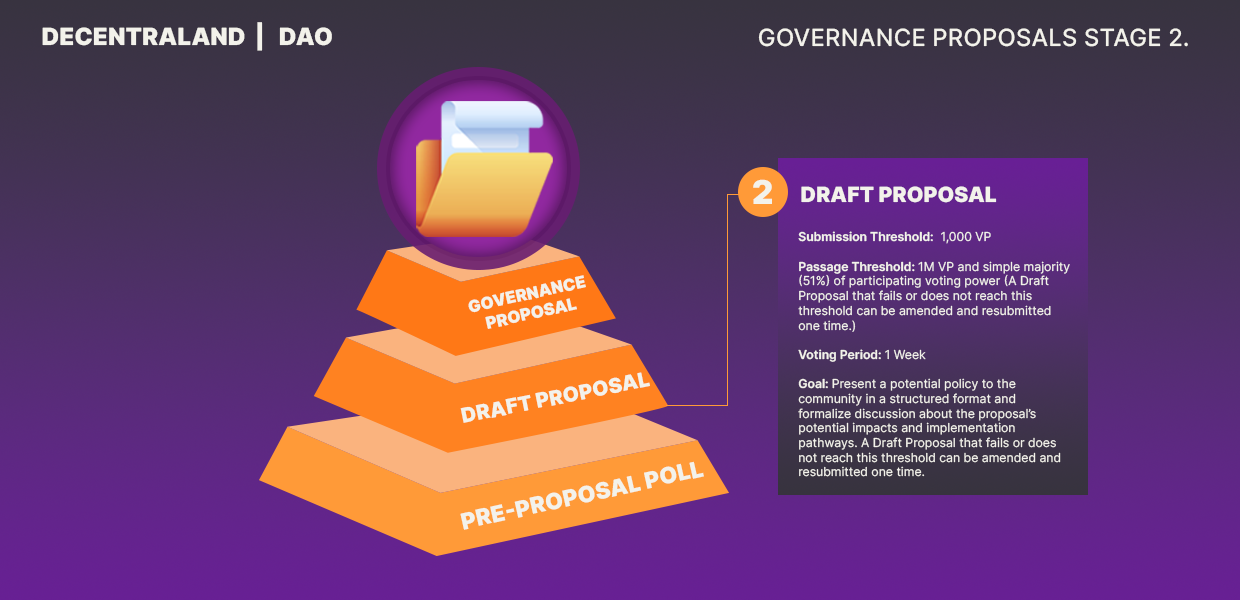
<style>
.page{position:relative;width:1240px;height:600px}
.page>*{position:absolute;margin:0}
.t1{font:23.8px "Inter-Black";color:#f3f2eb;text-transform:uppercase}
.t2{font:23.8px "Inter-Medium";color:#f3f2eb;text-transform:uppercase}
.t3{font:33px "Inter-Black";color:#f3f2eb;text-transform:uppercase}
.t4{font:20.9px "Inter-Black";color:#f3f2eb;text-transform:uppercase}
.t5{font:12.2px "Inter-Regular";color:#f3f2eb}
.t6{font:12.2px "Inter-SemiBold";color:#f3f2eb}
.t7{font:16.3px "Inter-Black";color:#f3f2eb;text-transform:uppercase}
.t8{font:20.4px "Inter-Black";color:#f3f2eb;text-transform:uppercase}
.t9{font:22.6px "Inter-Black";color:#f3f2eb;text-transform:uppercase}
</style>
<div class="page">
<p class="t1" style="left:42px;top:22px;width:290px;height:29px">decentraland  |   DAO</p>
<p class="t2" style="left:758px;top:28px;width:430px;height:19px">Governance proposals Stage 2.</p>
<p class="t3" style="left:753px;top:179px;width:19px;height:25px">2</p>
<p class="t4" style="left:801px;top:186px;width:196px;height:17px">Draft ProposaL</p>
<p class="t5" style="left:798px;top:231px;width:272px;height:246px"><span class="t6">Submission Threshold:</span>  1,000 VP<br><br><span class="t6">Passage Threshold: </span>1M VP and simple majority (51%) of participating voting power (A Draft Proposal that fails or does not reach this threshold can be amended and resubmitted one time.)<br><br><span class="t6">Voting Period: </span>1 Week<br><br><span class="t6">Goal: </span>Present a potential policy to the community in a structured format and formalize discussion about the proposal’s potential impacts and implementation pathways. A Draft Proposal that fails or does not reach this threshold can be amended and resubmitted one time.</p>
<p class="t7" style="left:468px;top:275px;width:118px;height:54px;rotate:-13deg">Governance ProposaL</p>
<p class="t8" style="left:460px;top:372px;width:190px;height:51px;rotate:-11deg">Draft Proposal</p>
<p class="t9" style="left:460px;top:461px;width:244px;height:69px;rotate:-13deg">Pre-Proposal Poll</p>
</div>
